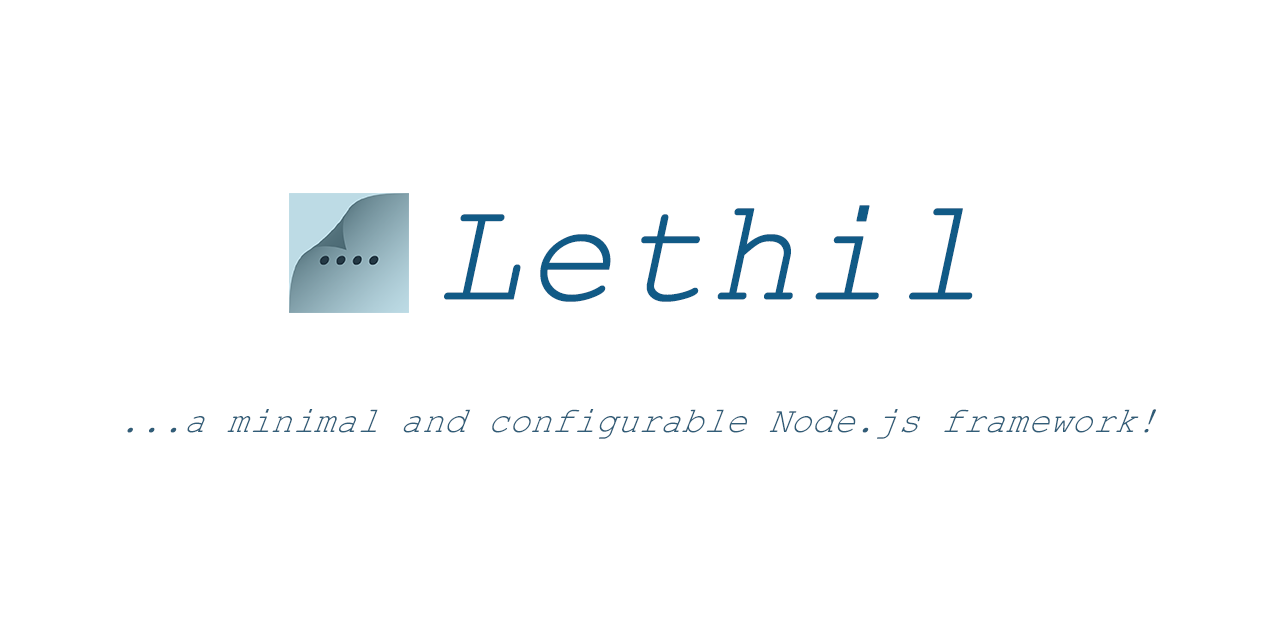
<style>
.page{position:relative;width:1280px;height:640px;background:#ffffff}
.page>*{position:absolute;margin:0}
.t1{font:147px "CourierNewPS-ItalicMT";color:#115a86;font-weight:bold}
.t2{font:36px "CourierNewPS-ItalicMT";color:#315d78;font-style:italic}
</style>
<div class="page">
<p class="t1" style="left:444px;top:205px;width:529px;height:97px">Lethil</p>
<p class="t2" style="left:127px;top:409px;width:1029px;height:30px">...a minimal and configurable Node.js framework!</p>
</div>
